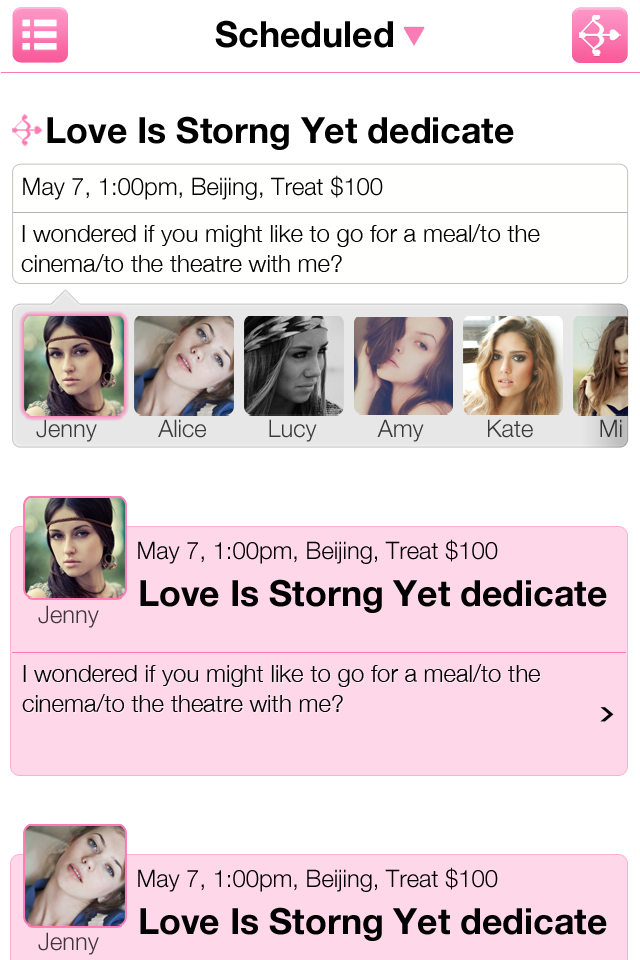
<style>
.page{position:relative;width:640px;height:960px;background:#ffffff}
.page>*{position:absolute;margin:0}
.t1{font:36px "HelveticaNeue-Bold";color:#000000}
.t2{font:24px "HelveticaNeue-Light";color:#000000}
.t3{font:24px/6px "HelveticaNeue-Light";color:#000000}
.t4{font:24px "HelveticaNeue-Light";color:#3a3a3a}
.t5{font:24px "HelveticaNeue-Light";color:#333333}
.t6{font:24px "HelveticaNeue-Light";color:#40363a}
</style>
<div class="page">
<p class="t1" style="left:215px;top:20px;width:178px;height:28px">Scheduled</p>
<p class="t1" style="left:47px;top:116px;width:467px;height:34px">Love Is Storng Yet dedicate</p>
<p class="t2" style="left:23px;top:175px;width:360px;height:25px">May 7, 1:00pm, Beijing, Treat $100</p>
<p class="t3" style="left:21px;top:224px;width:519px;height:48px">I wondered if you might like to go for a meal/to the <br><br><br><br><br>cinema/to the theatre with me?</p>
<p class="t4" style="left:36px;top:419px;width:61px;height:23px">Jenny</p>
<p class="t4" style="left:158px;top:419px;width:48px;height:19px">Alice</p>
<p class="t4" style="left:269px;top:419px;width:48px;height:23px">Lucy</p>
<p class="t4" style="left:377px;top:419px;width:47px;height:23px">Amy</p>
<p class="t4" style="left:488px;top:419px;width:45px;height:19px">Kate</p>
<p class="t5" style="left:600px;top:419px;width:22px;height:18px">Mi</p>
<p class="t2" style="left:138px;top:539px;width:360px;height:25px">May 7, 1:00pm, Beijing, Treat $100</p>
<p class="t1" style="left:140px;top:579px;width:467px;height:34px">Love Is Storng Yet dedicate</p>
<p class="t6" style="left:38px;top:605px;width:61px;height:23px">Jenny</p>
<p class="t3" style="left:22px;top:664px;width:518px;height:48px">I wondered if you might like to go for a meal/to the <br><br><br><br><br>cinema/to the theatre with me?</p>
<p class="t2" style="left:138px;top:867px;width:360px;height:25px">May 7, 1:00pm, Beijing, Treat $100</p>
<p class="t1" style="left:140px;top:907px;width:467px;height:34px">Love Is Storng Yet dedicate</p>
<p class="t6" style="left:38px;top:932px;width:61px;height:23px">Jenny</p>
</div>
